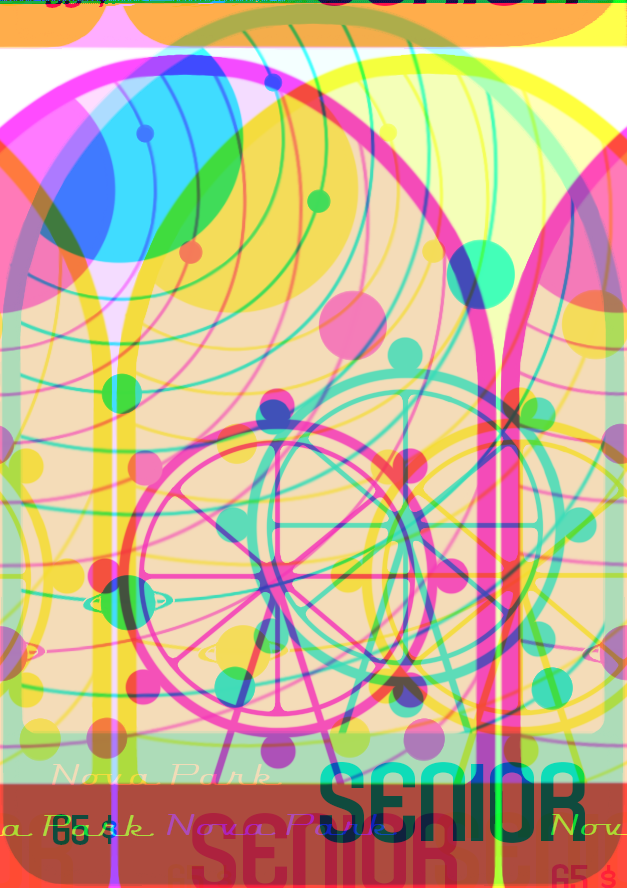
<style>
.page{position:relative;width:627px;height:888px}
.page>*{position:absolute;margin:0}
.t1{font:111.8px "KleptocracyTitlingRg-Regular"}
.t2{font:33px "RocketScript"}
.t3{font:42.2px "KleptocracyTitlingRg-Regular";color:#0f4b3e}
</style>
<div class="page">
<p class="t1" style="left:319px;top:761px;width:266px;height:82px">SENIOR</p>
<p class="t2" style="left:52px;top:764px;width:230px;height:21px">Nova Park</p>
<p class="t3" style="left:53px;top:814px;width:64px;height:31px">65 $</p>
</div>
